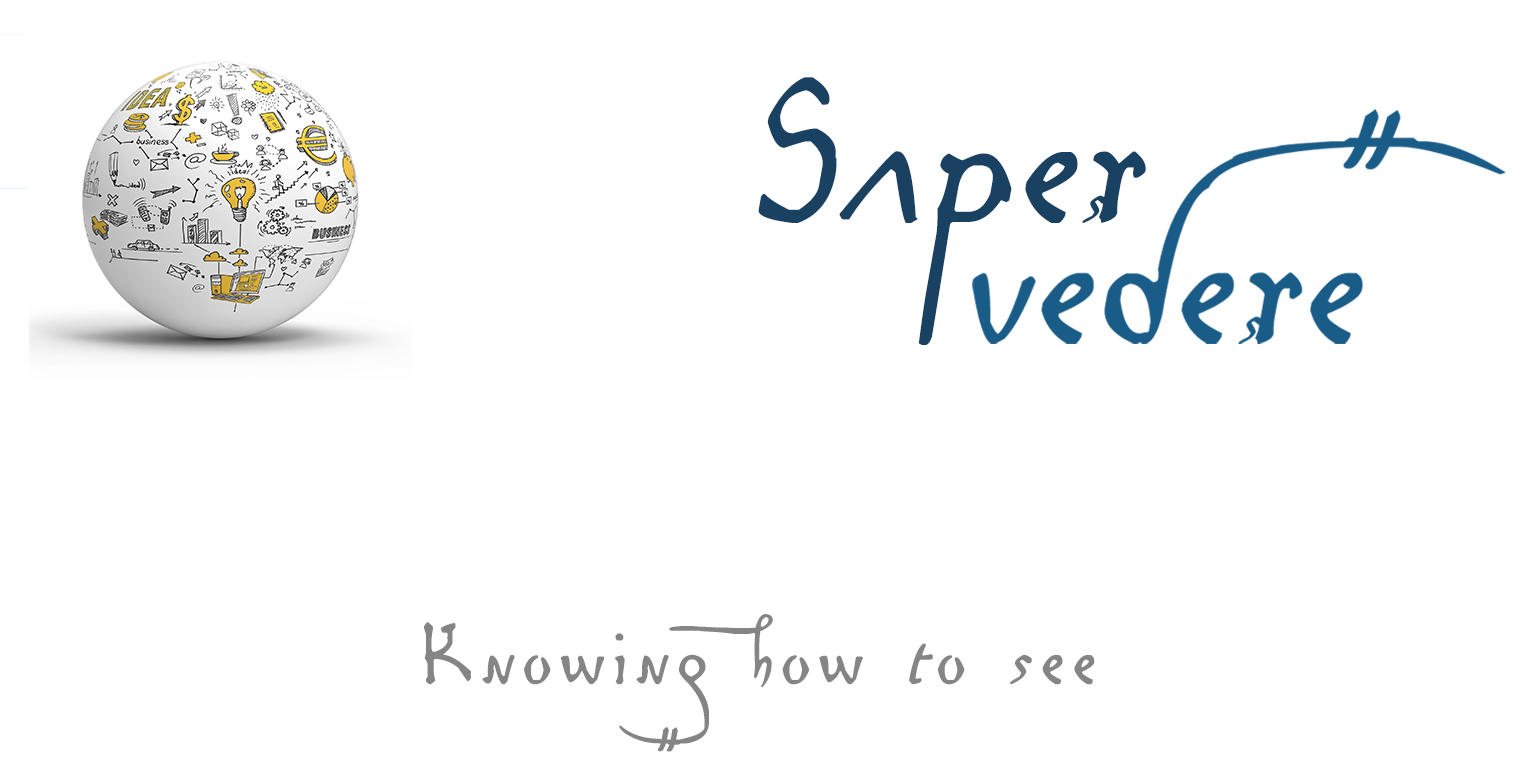
<style>
.page{position:relative;width:1536px;height:768px;background:#ffffff}
.page>*{position:absolute;margin:0}
.t1{font:292.1px "LeonardoHandF";color:#194162;font-style:italic}
.t2{font:120px "LeonardoHandF";letter-spacing:0.05em;color:#858585}
</style>
<div class="page">
<p class="t1" style="left:758px;top:77px;width:388px;height:268px">Saper</p>
<p class="t2" style="left:424px;top:614px;width:671px;height:138px">Knowing how to see</p>
</div>
